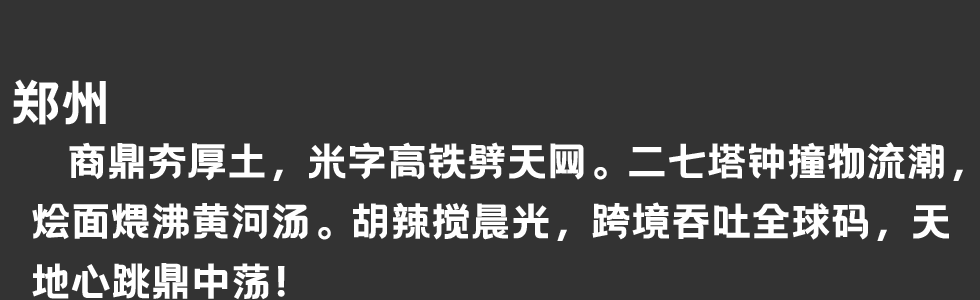
<style>
.page{position:relative;width:980px;height:300px;background:#333333}
.page>*{position:absolute;margin:0}
.t1{font:50px "HelloFont-WenYiHei";color:#ffffff}
.t2{font:40px/60px "HelloFont-WenYiHei";color:#ffffff}
</style>
<div class="page">
<p class="t1" style="left:13px;top:79px;width:93px;height:46px">郑州</p>
<p class="t2" style="left:32px;top:142px;width:931px;height:158px">商鼎夯厚土，米字高铁劈天网。二七塔钟撞物流潮，<br>烩面煨沸黄河汤。胡辣搅晨光，跨境吞吐全球码，天<br>地心跳鼎中荡！</p>
</div>
